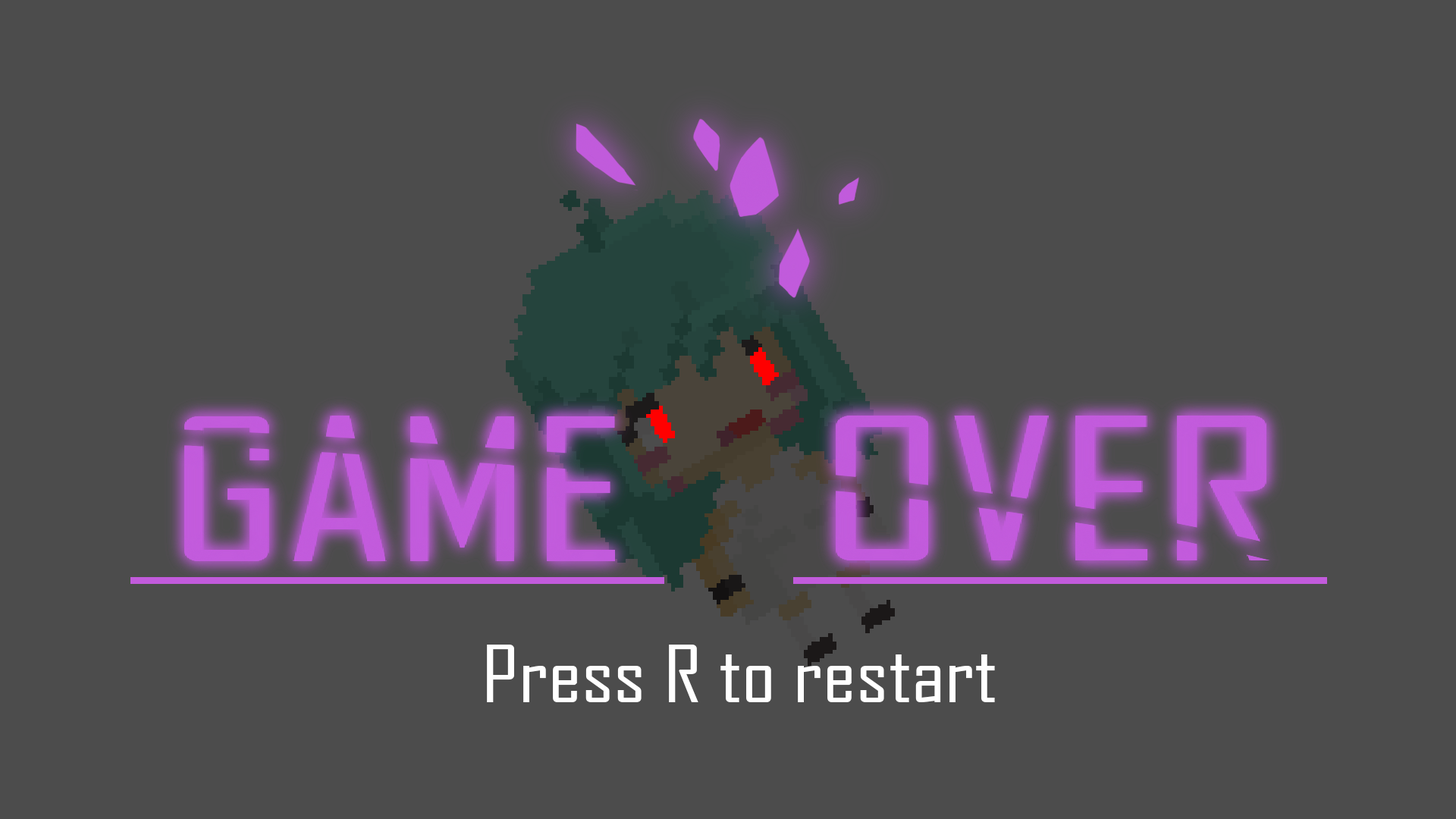
<style>
.page{position:relative;width:1456px;height:819px;background:#4c4c4c}
.page>*{position:absolute;margin:0}
.t1{font:75.8px "AgencyFB-Reg";color:#ffffff;scale:1.18 1}
</style>
<div class="page">
<p class="t1" style="left:487px;top:645px;width:508px;height:57px">Press R to restart</p>
</div>
